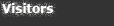
<style>
.page{position:relative;width:114px;height:26px;background:#333333}
.page>*{position:absolute;margin:0}
.t1{font:12px "Verdana-Bold";color:#ffffff}
</style>
<div class="page">
<p class="t1" style="left:2px;top:3px;width:51px;height:10px">Visitors</p>
</div>
